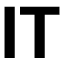
<style>
.page{position:relative;width:64px;height:64px;background:#ffffff}
.page>*{position:absolute;margin:0}
.t1{font:72px "Roboto-Bold";color:#000000}
</style>
<div class="page">
<p class="t1" style="left:4px;top:6px;width:56px;height:52px">IT</p>
</div>
